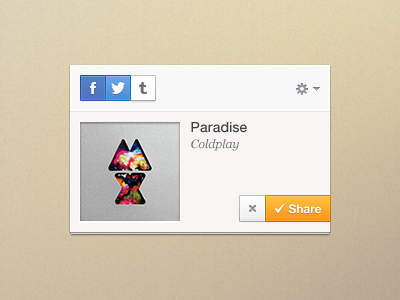
<style>
.page{position:relative;width:400px;height:300px}
.page>*{position:absolute;margin:0}
.t1{font:14px "HelveticaNeue-Medium";color:#404040}
.t2{font:12px "Georgia-Italic";color:#6e6e6e}
.t3{font:12px "HelveticaNeue-Bold";color:#ffffff}
</style>
<div class="page">
<p class="t1" style="left:191px;top:122px;width:56px;height:11px">Paradise</p>
<p class="t2" style="left:191px;top:139px;width:48px;height:12px">Coldplay</p>
<p class="t3" style="left:288px;top:204px;width:34px;height:10px">Share</p>
</div>
